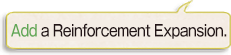
<style>
.page{position:relative;width:231px;height:55px;background:#f4ede5}
.page>*{position:absolute;margin:0}
.t1{font:16px "GothicMB101Pro-Medium";letter-spacing:-0.04em;color:#221517;scale:0.8 1}
.t2{font:16px "GothicMB101Pro-Medium";letter-spacing:-0.04em;color:#61a856;scale:0.8 1}
</style>
<div class="page">
<p class="t1" style="left:11px;top:23px;width:216px;height:16px"><span class="t2">Add</span> a Reinforcement Expansion.</p>
</div>
